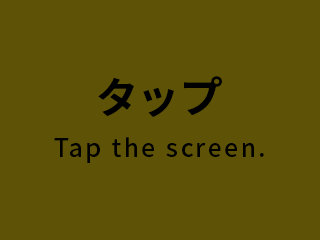
<style>
.page{position:relative;width:320px;height:240px;background:#5d5206}
.page>*{position:absolute;margin:0}
.t1{font:42.6px "SourceHanSans-Bold";letter-spacing:0.1em;color:#000000}
.t2{font:25.1px "SourceHanSans-Medium";letter-spacing:0.1em;color:#000000}
</style>
<div class="page">
<p class="t1" style="left:98px;top:76px;width:124px;height:41px">タップ</p>
<p class="t2" style="left:54px;top:137px;width:210px;height:26px">Tap the screen.</p>
</div>
